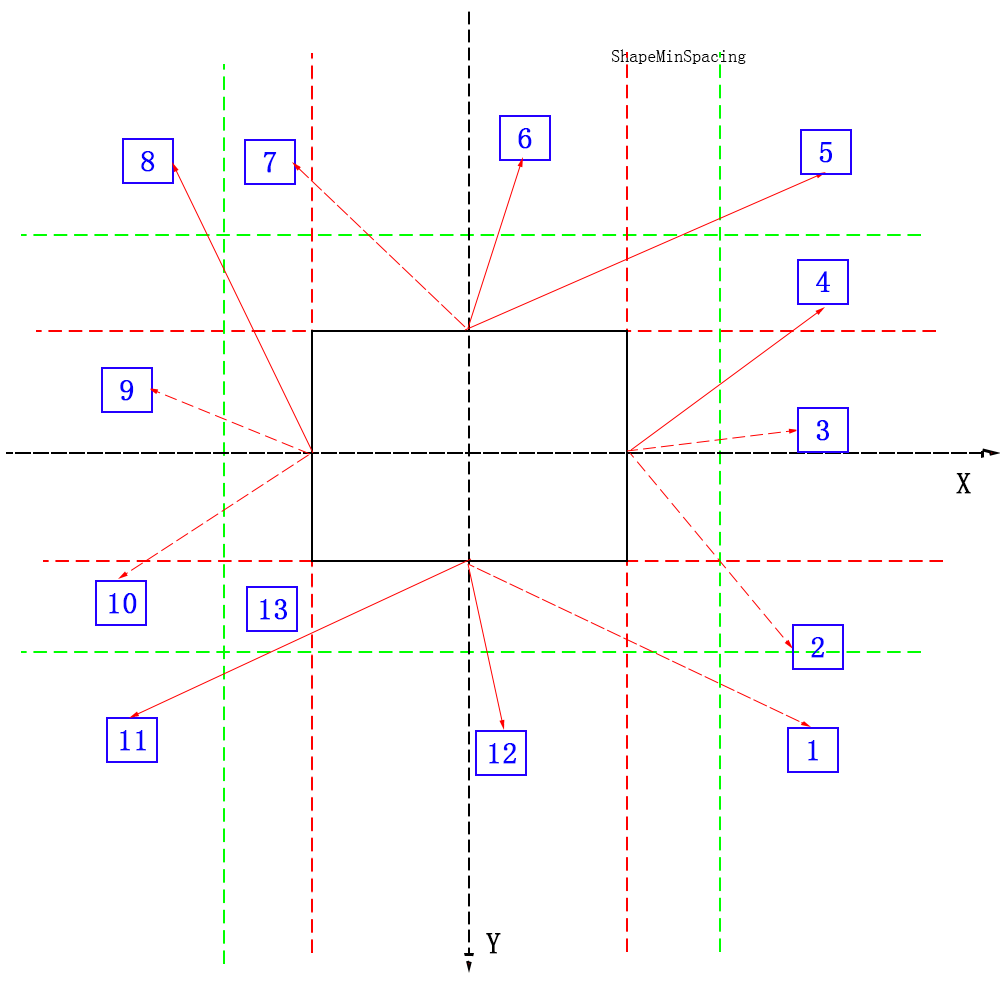
<style>
.page{position:relative;width:1000px;height:1000px;background:#ffffff}
.page>*{position:absolute;margin:0}
.t1{font:18px "YouYuan";color:#000000}
.t2{font:30px "YouYuan";color:#0600ff;font-weight:bold}
.t3{font:30px "YouYuan";color:#010000;font-weight:bold}
.t4{font:30px "YouYuan";color:#000000;font-weight:bold}
</style>
<div class="page">
<p class="t1" style="left:611px;top:49px;width:135px;height:15px">ShapeMinSpacing</p>
<p class="t2" style="left:518px;top:128px;width:14px;height:21px">6</p>
<p class="t2" style="left:819px;top:142px;width:13px;height:21px">5</p>
<p class="t2" style="left:141px;top:151px;width:14px;height:21px">8</p>
<p class="t2" style="left:263px;top:152px;width:14px;height:21px">7</p>
<p class="t2" style="left:816px;top:271px;width:14px;height:21px">4</p>
<p class="t2" style="left:120px;top:380px;width:14px;height:21px">9</p>
<p class="t2" style="left:816px;top:420px;width:13px;height:21px">3</p>
<p class="t3" style="left:956px;top:473px;width:15px;height:21px">X</p>
<p class="t2" style="left:109px;top:593px;width:28px;height:21px">10</p>
<p class="t2" style="left:260px;top:599px;width:27px;height:21px">13</p>
<p class="t2" style="left:811px;top:637px;width:13px;height:21px">2</p>
<p class="t2" style="left:120px;top:730px;width:26px;height:21px">11</p>
<p class="t2" style="left:489px;top:743px;width:27px;height:21px">12</p>
<p class="t2" style="left:808px;top:740px;width:10px;height:21px">1</p>
<p class="t4" style="left:486px;top:933px;width:15px;height:21px">Y</p>
</div>
